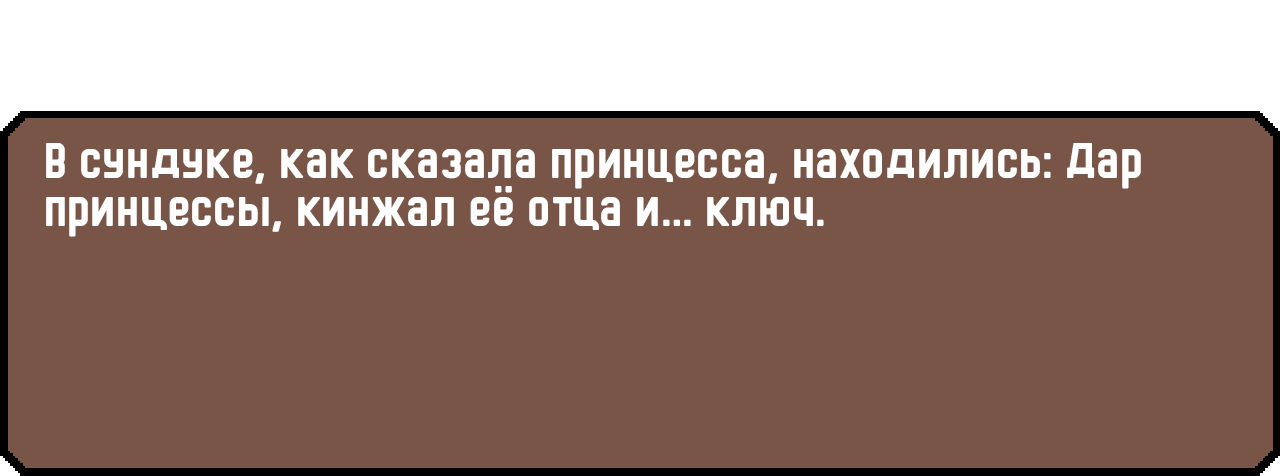
<style>
.page{position:relative;width:1280px;height:476px;background:#795548}
.page>*{position:absolute;margin:0}
.t1{font:48px/48px "HermanoMayor";color:#ffffff}
</style>
<div class="page">
<p class="t1" style="left:46px;top:143px;width:1095px;height:94px">В сундуке, как сказала принцесса, находились: Дар принцессы, кинжал её отца и… ключ.</p>
</div>
